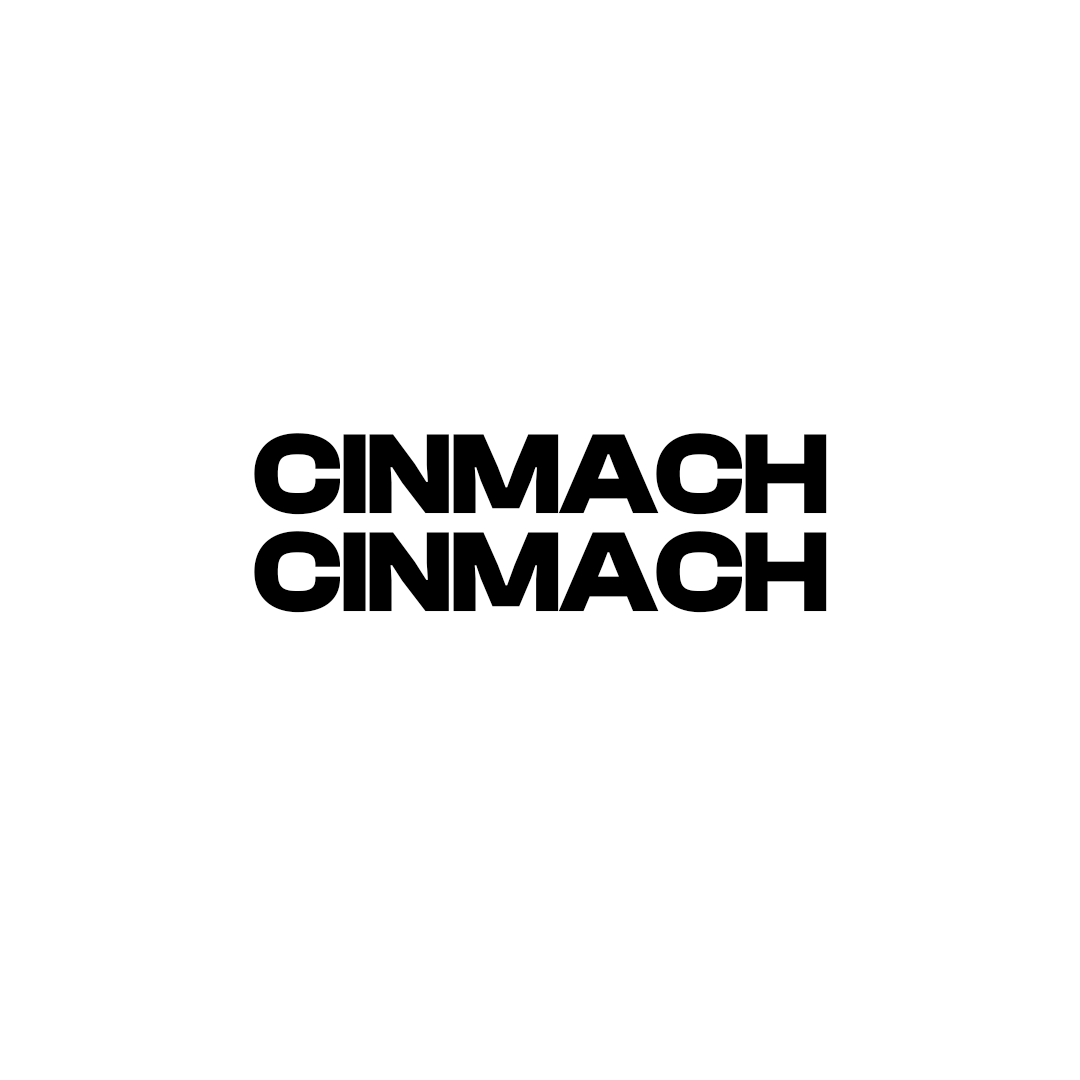
<style>
.page{position:relative;width:1080px;height:1080px;background:#ffffff}
.page>*{position:absolute;margin:0}
.t1{font:117.3px "ClashDisplay-Bold";letter-spacing:-0.02em;color:#000000}
</style>
<div class="page">
<p class="t1" style="left:254px;top:433px;width:573px;height:82px">CINMACH</p>
<p class="t1" style="left:254px;top:531px;width:573px;height:82px">CINMACH</p>
</div>
